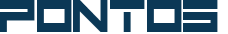
<style>
.page{position:relative;width:228px;height:34px;background:#0b3856}
.page>*{position:absolute;margin:0}
.t1{font:57.3px "MegatonExtras";letter-spacing:-0.05em;color:#0b3856;scale:0.8 1}
</style>
<div class="page">
<p class="t1" style="left:0px;top:0px;width:218px;height:32px">PONTOS</p>
</div>
